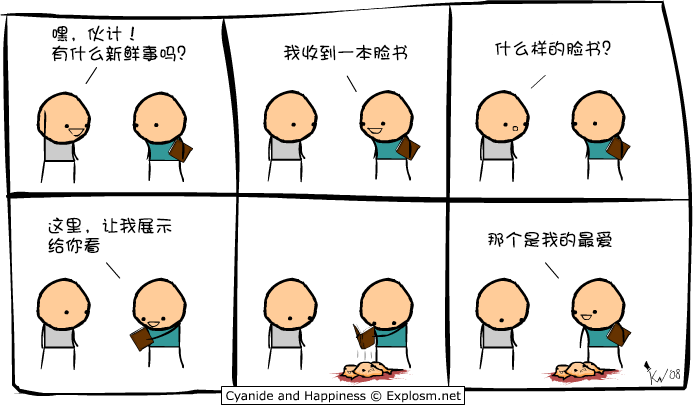
<style>
.page{position:relative;width:693px;height:405px;background:#ffffff}
.page>*{position:absolute;margin:0}
.t1{font:18px/20px "DFPShaoNvW5";color:#000000}
.t2{font:18px "DFPShaoNvW5";color:#000000}
</style>
<div class="page">
<p class="t1" style="left:52px;top:25px;width:134px;height:37px">嘿，伙计！<br>有什么新鲜事吗？</p>
<p class="t2" style="left:495px;top:40px;width:116px;height:17px">什么样的脸书？</p>
<p class="t2" style="left:283px;top:44px;width:125px;height:17px">我收到一本脸书</p>
<p class="t1" style="left:48px;top:217px;width:124px;height:37px">这里，让我展示<br>给你看</p>
<p class="t2" style="left:488px;top:231px;width:124px;height:17px">那个是我的最爱</p>
</div>
